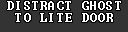
<style>
.page{position:relative;width:128px;height:32px;background:#333333}
.page>*{position:absolute;margin:0}
.t1{font:12px/11.9px "Terminal";letter-spacing:0.075em;color:#ffffff}
</style>
<div class="page">
<p class="t1" style="left:7px;top:1px;width:114px;height:21px;text-align:center">DISTRACT GHOST<br>TO LITE DOOR</p>
</div>
